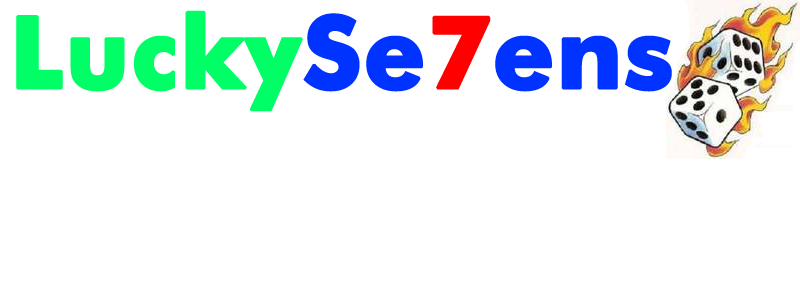
<style>
.page{position:relative;width:800px;height:300px;background:#ffffff}
.page>*{position:absolute;margin:0}
.t1{font:100px "FuturaBT-Bold";color:#00ff66;font-weight:bold}
.t2{font:100px "FuturaBT-Bold";color:#0033ff;font-weight:bold}
.t3{font:100px "FuturaBT-Bold";color:#ff0000;font-weight:bold}
</style>
<div class="page">
<p class="t1" style="left:16px;top:10px;width:656px;height:102px">Lucky<span class="t2">Se</span><span class="t3">7</span><span class="t2">ens</span></p>
</div>
